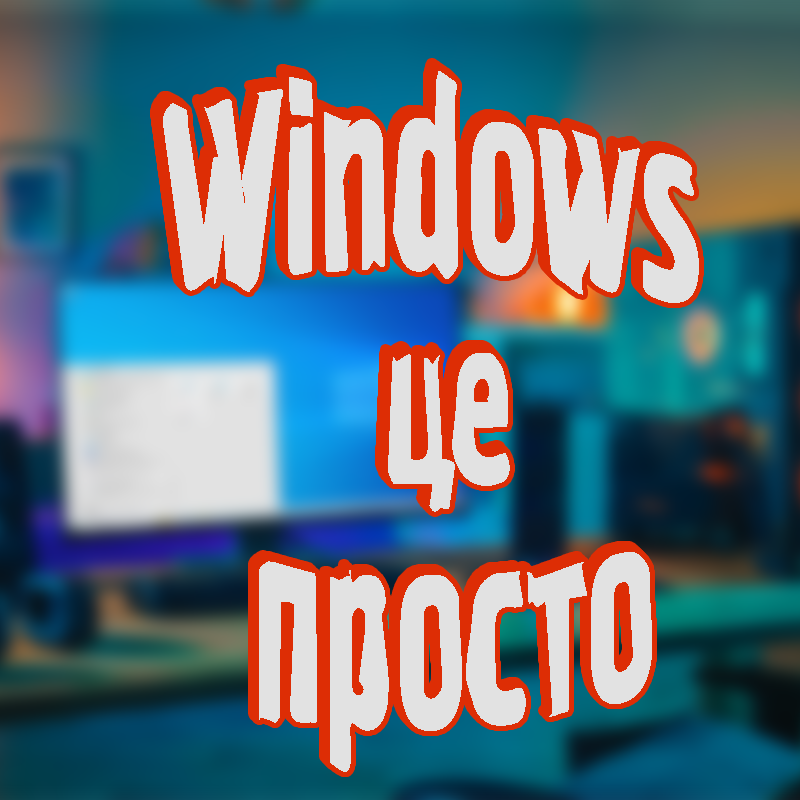
<style>
.page{position:relative;width:800px;height:800px}
.page>*{position:absolute;margin:0}
.t1{font:233.3px "Graffiti1CTT-Regular";color:#e2e2e2;scale:0.7 1}
.t2{font:233.3px "Graffiti1CTT-Regular";scale:0.6 1}
.t3{font:233.3px "Graffiti1CTT-Regular";color:#e2e2e2;scale:0.6 1}
</style>
<div class="page">
<p class="t1" style="left:155px;top:63px;width:536px;height:233px">Windows</p>
<p class="t1" style="left:157px;top:64px;width:536px;height:233px">Windows</p>
<p class="t1" style="left:158px;top:66px;width:536px;height:233px">Windows</p>
<p class="t1" style="left:160px;top:68px;width:536px;height:232px">Windows</p>
<p class="t1" style="left:161px;top:69px;width:536px;height:233px">Windows</p>
<p class="t1" style="left:163px;top:71px;width:536px;height:232px">Windows</p>
<p class="t2" style="left:380px;top:345px;width:122px;height:159px">це</p>
<p class="t3" style="left:382px;top:346px;width:122px;height:159px">це</p>
<p class="t3" style="left:383px;top:348px;width:122px;height:159px">це</p>
<p class="t3" style="left:385px;top:350px;width:122px;height:159px">це</p>
<p class="t3" style="left:386px;top:351px;width:122px;height:159px">це</p>
<p class="t3" style="left:388px;top:353px;width:122px;height:159px">це</p>
<p class="t1" style="left:253px;top:546px;width:393px;height:220px">просто</p>
<p class="t1" style="left:254px;top:547px;width:394px;height:220px">просто</p>
<p class="t1" style="left:256px;top:549px;width:393px;height:220px">просто</p>
<p class="t1" style="left:257px;top:550px;width:394px;height:220px">просто</p>
<p class="t1" style="left:259px;top:552px;width:393px;height:220px">просто</p>
<p class="t1" style="left:259px;top:552px;width:393px;height:220px">просто</p>
</div>
